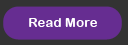
<style>
.page{position:relative;width:128px;height:45px;background:#662d91}
.page>*{position:absolute;margin:0}
.t1{font:13.3px "ArialRoundedMTBold";color:#ffffff}
</style>
<div class="page">
<p class="t1" style="left:29px;top:18px;width:68px;height:9px">Read More</p>
</div>
